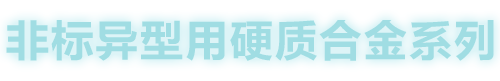
<style>
.page{position:relative;width:500px;height:81px;background:#ffffff}
.page>*{position:absolute;margin:0}
.t1{font:44.8px "FZLTCHJW--GB1-0";color:#a0dde3;text-transform:uppercase}
</style>
<div class="page">
<p class="t1" style="left:6px;top:20px;width:488px;height:41px">非标异型用硬质合金系列</p>
</div>
